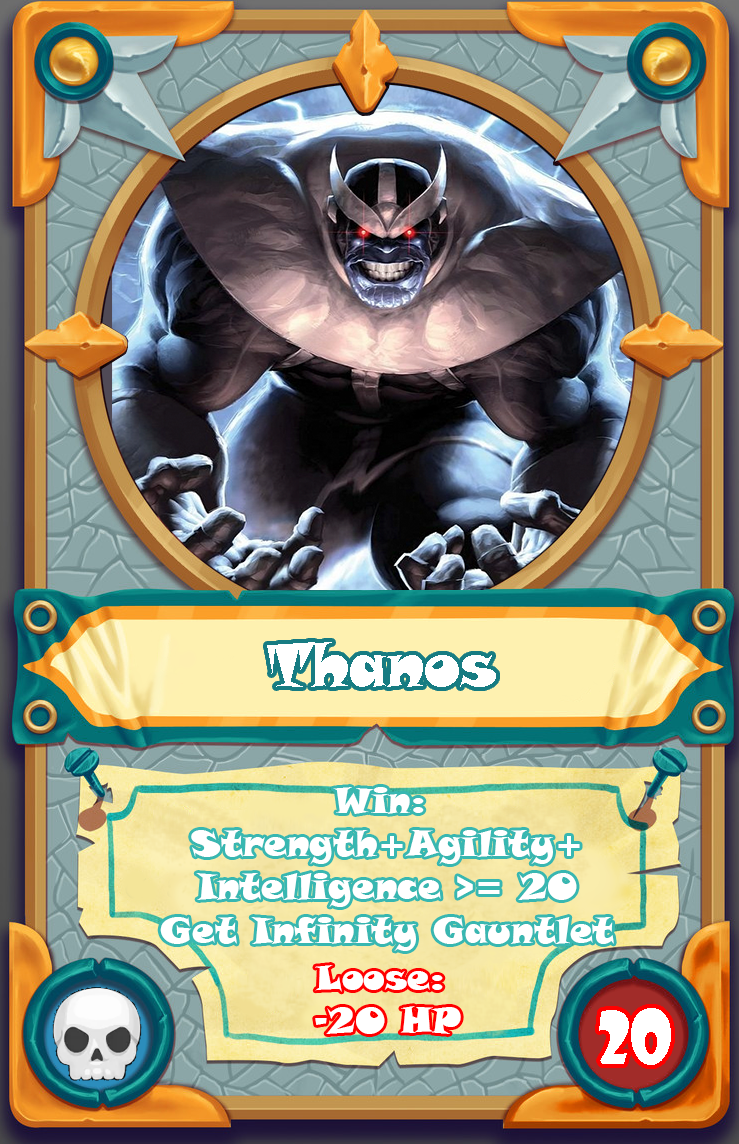
<style>
.page{position:relative;width:739px;height:1144px}
.page>*{position:absolute;margin:0}
.t1{font:60px "SnapITC-Regular";color:#ffffff}
.t2{font:36px "SnapITC-Regular";color:#ffffff}
.t3{font:72px "ShowcardGothic-Reg";color:#ffffff}
</style>
<div class="page">
<p class="t1" style="left:267px;top:642px;width:229px;height:45px">Thanos</p>
<p class="t2" style="left:160px;top:787px;width:454px;height:164px;text-align:center">Win: <br>Strength+Agility+<br>Intelligence &gt;= 20<br>Get Infinity Gauntlet</p>
<p class="t2" style="left:315px;top:965px;width:146px;height:69px;text-align:center">Loose: <br>-20 HP</p>
<p class="t3" style="left:599px;top:1008px;width:72px;height:57px">20</p>
</div>
